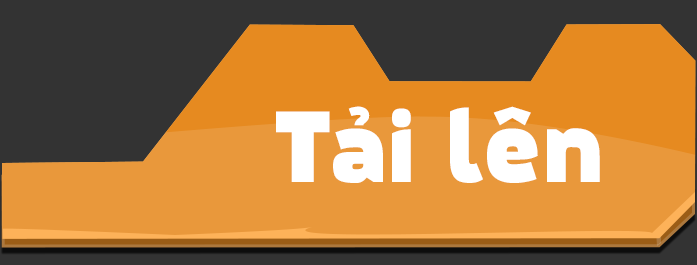
<style>
.page{position:relative;width:697px;height:265px;background:#333333}
.page>*{position:absolute;margin:0}
.t1{font:99.4px "MovaviGrotesqueBlack";color:#ffffff}
</style>
<div class="page">
<p class="t1" style="left:276px;top:106px;width:324px;height:77px">Tải lên</p>
</div>
